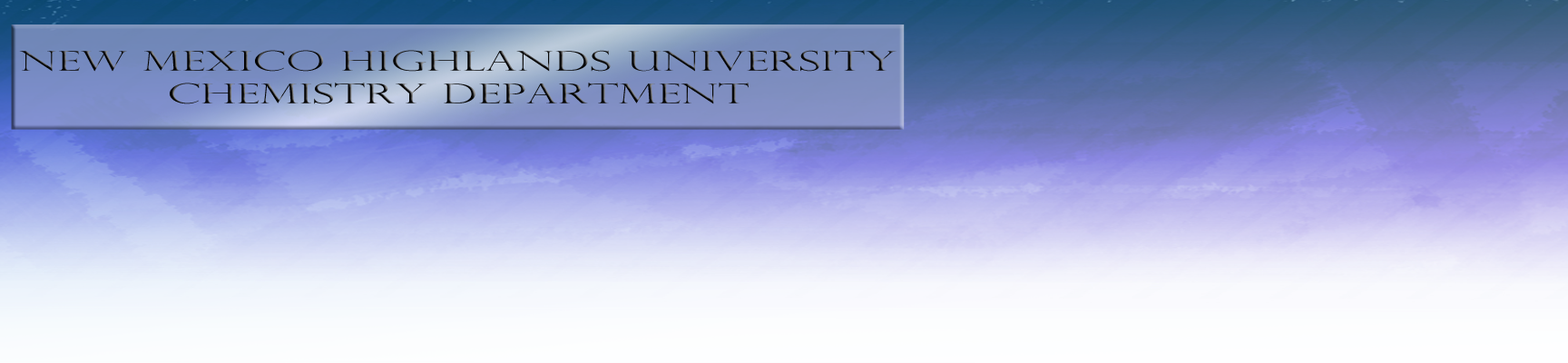
<style>
.page{position:relative;width:1568px;height:363px}
.page>*{position:absolute;margin:0}
.t1{font:27.2px "PerpetuaTitlingMT-Light";color:#080808;scale:1.69 1}
</style>
<div class="page">
<p class="t1" style="left:19px;top:50px;width:878px;height:54px;text-align:center">New Mexico Highlands University <br>Chemistry Department</p>
</div>
